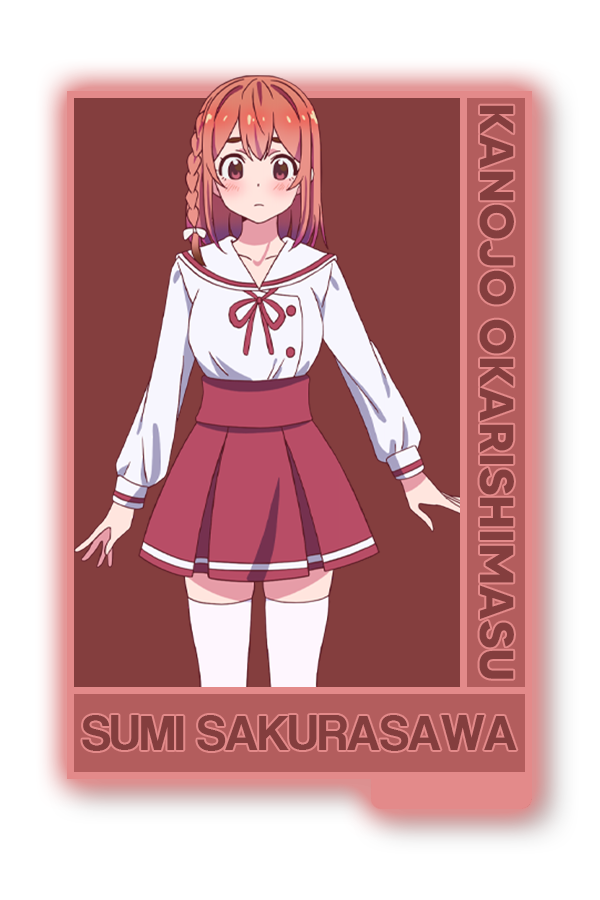
<style>
.page{position:relative;width:600px;height:900px;background:#843e3e}
.page>*{position:absolute;margin:0}
.t1{font:47.6px "MADETOMMY-Bold";color:#843e3e}
.t2{font:50.6px "CoolveticaRg-Regular";color:#843e3e}
</style>
<div class="page">
<p class="t1" style="left:479px;top:105px;width:35px;height:574px;rotate:90deg">KANOJO OKARISHIMASU</p>
<p class="t2" style="left:82px;top:715px;width:435px;height:36px">SUMI SAKURASAWA</p>
</div>
